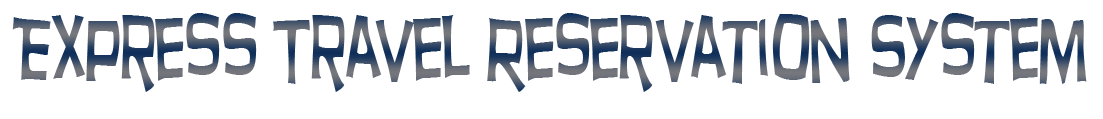
<style>
.page{position:relative;width:1103px;height:119px;background:#ffffff}
.page>*{position:absolute;margin:0}
.t1{font:85.1px "HurryUp";scale:0.73 1}
</style>
<div class="page">
<p class="t1" style="left:12px;top:13px;width:1075px;height:79px">Express Travel Reservation System</p>
</div>
